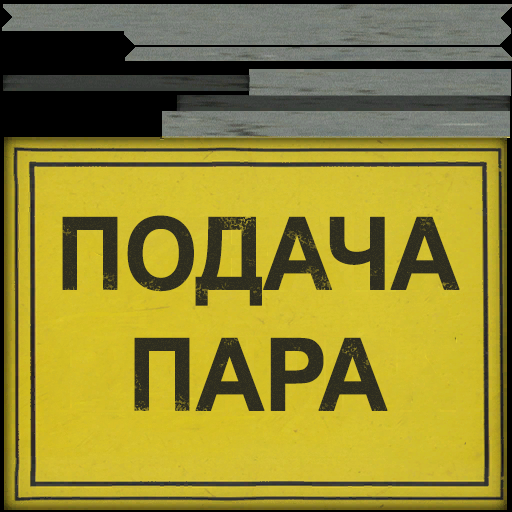
<style>
.page{position:relative;width:512px;height:512px}
.page>*{position:absolute;margin:0}
.t1{font:101px/121px "Arial-BoldMT";letter-spacing:-0.03em;color:#2d2c20;text-transform:uppercase;font-weight:bold;scale:0.94 1}
</style>
<div class="page">
<p class="t1" style="left:62px;top:215px;width:398px;height:196px;text-align:center">ПОДАЧА<br>ПАРА</p>
</div>
